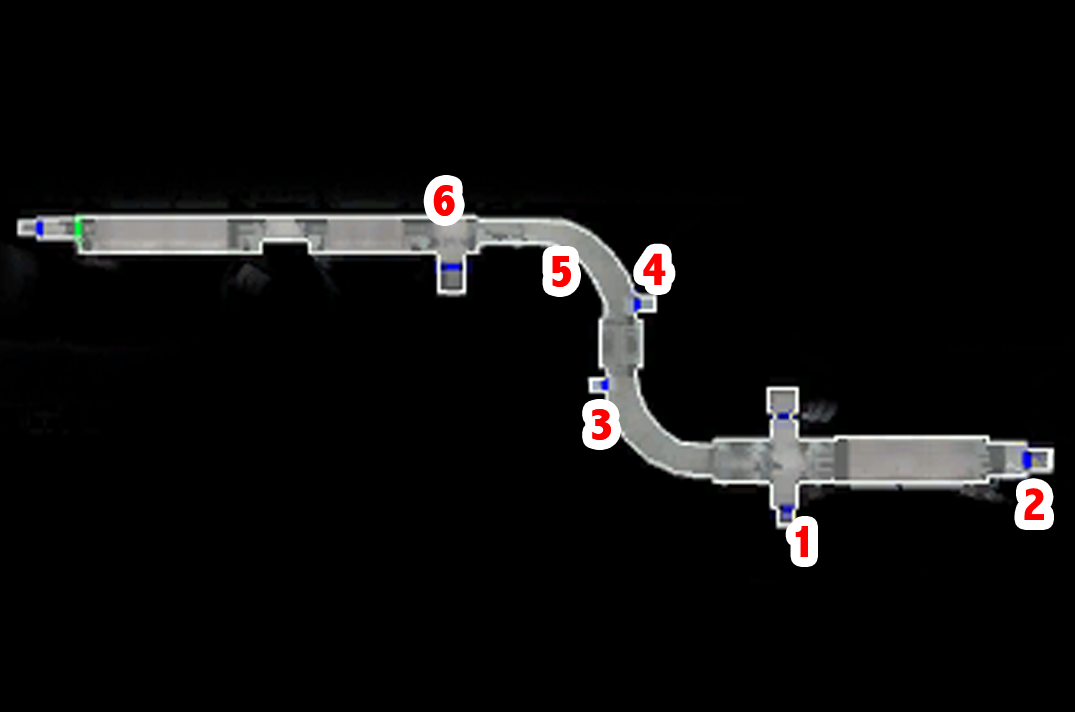
<style>
.page{position:relative;width:1075px;height:712px;background:#000000}
.page>*{position:absolute;margin:0}
.t1{font:48px "AbadiMT-CondensedExtraBold";color:#ff0000}
</style>
<div class="page">
<p class="t1" style="left:433px;top:185px;width:22px;height:31px">6</p>
<p class="t1" style="left:552px;top:256px;width:19px;height:31px">5</p>
<p class="t1" style="left:643px;top:253px;width:23px;height:32px">4</p>
<p class="t1" style="left:592px;top:409px;width:19px;height:31px">3</p>
<p class="t1" style="left:1024px;top:488px;width:20px;height:32px">2</p>
<p class="t1" style="left:795px;top:526px;width:13px;height:31px">1</p>
</div>
